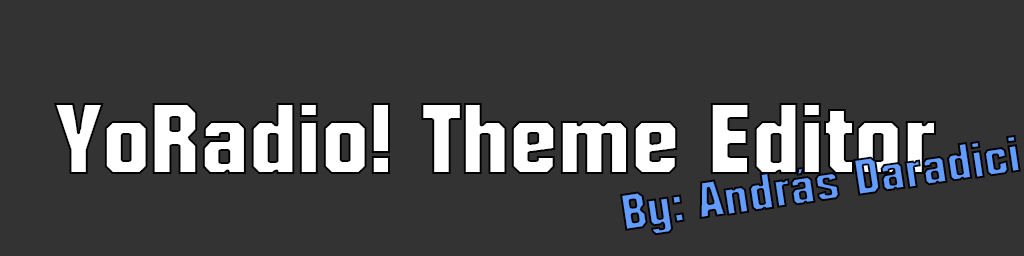
<style>
.page{position:relative;width:1024px;height:256px;background:#333333}
.page>*{position:absolute;margin:0}
.t1{font:98.6px "Autumn";color:#ffffff}
</style>
<div class="page">
<p class="t1" style="left:53px;top:103px;width:883px;height:71px">YoRadio! Theme Editor</p>
</div>
